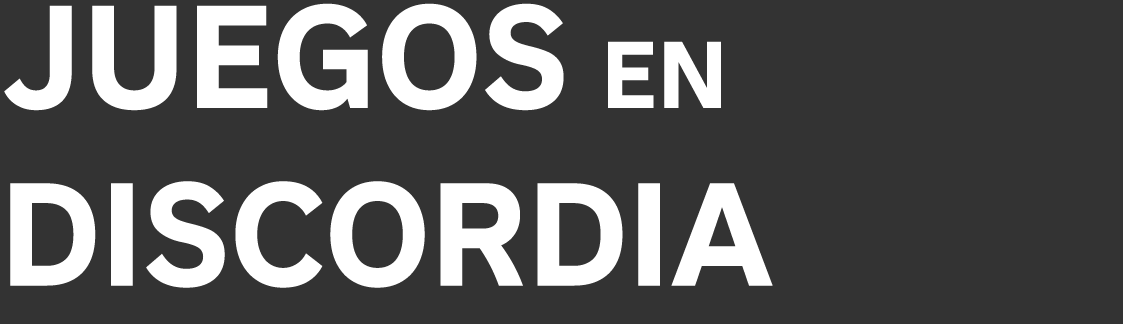
<style>
.page{position:relative;width:1123px;height:324px;background:#333333}
.page>*{position:absolute;margin:0}
.t1{font:147.9px "ggsans-Bold";color:#ffffff}
.t2{font:95.8px "ggsans-Bold";color:#ffffff}
</style>
<div class="page">
<p class="t1" style="left:4px;top:3px;width:769px;height:285px">JUEGOS <span class="t2">EN<br></span>DISCORDIA</p>
</div>
